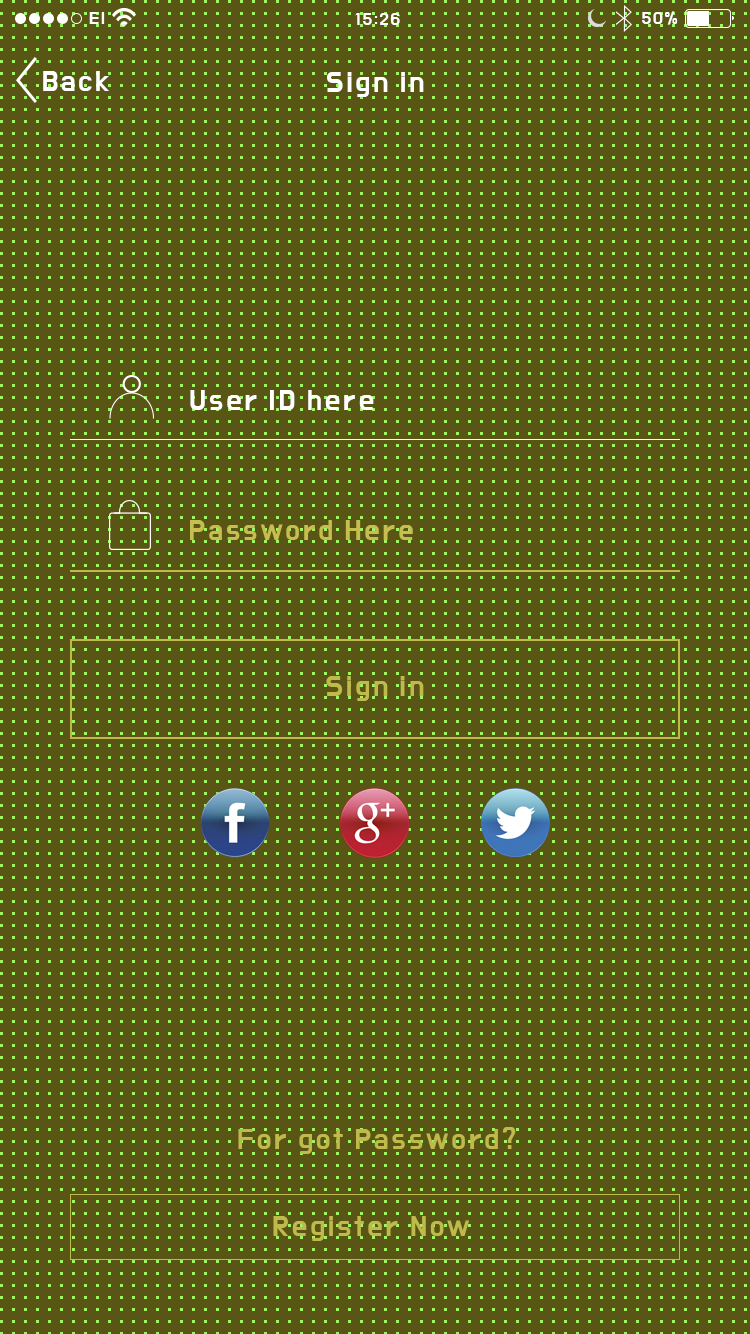
<style>
.page{position:relative;width:750px;height:1334px;background:#595514}
.page>*{position:absolute;margin:0}
.t1{font:18px "DoHyeon-Regular";letter-spacing:0.1em;color:#ffffff}
.t2{font:30px "DoHyeon-Regular";letter-spacing:0.1em;color:#ffffff}
.t3{font:30px "DoHyeon-Regular";letter-spacing:0.1em;color:#c6bf4f}
.t4{font:30px "DoHyeon-Regular";letter-spacing:0.1em;color:#c0b94c}
</style>
<div class="page">
<p class="t1" style="left:89px;top:12px;width:16px;height:12px">El</p>
<p class="t1" style="left:355px;top:13px;width:45px;height:12px">15:26</p>
<p class="t1" style="left:642px;top:11px;width:36px;height:14px">50%</p>
<p class="t2" style="left:43px;top:71px;width:66px;height:20px">Back</p>
<p class="t2" style="left:327px;top:72px;width:97px;height:25px">Sign in</p>
<p class="t2" style="left:190px;top:390px;width:184px;height:20px">User ID here</p>
<p class="t3" style="left:190px;top:520px;width:223px;height:20px">Password Here</p>
<p class="t4" style="left:326px;top:676px;width:98px;height:25px">Sign in</p>
<p class="t4" style="left:238px;top:1127px;width:278px;height:27px">For got Password?</p>
<p class="t4" style="left:273px;top:1216px;width:196px;height:25px">Register Now</p>
</div>
